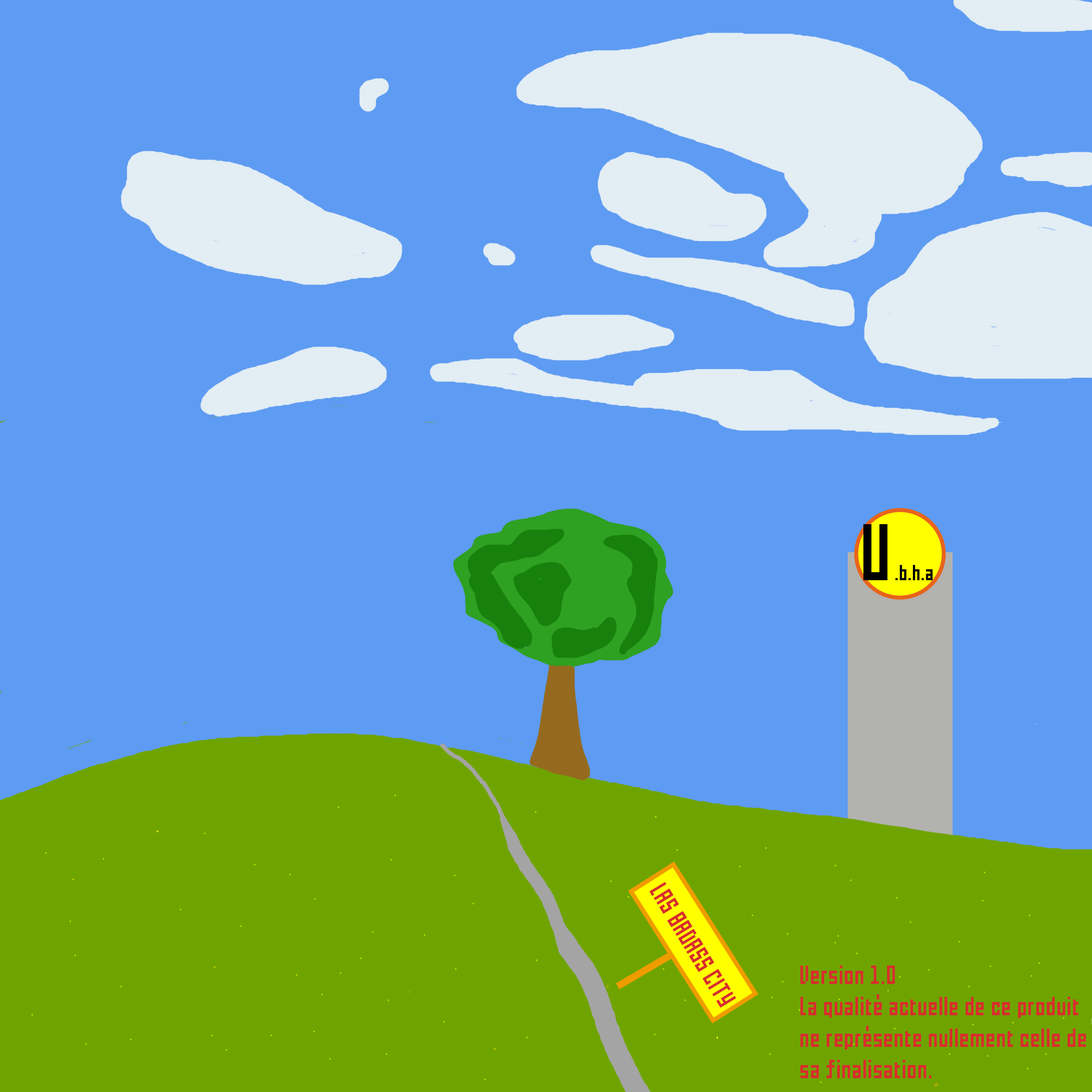
<style>
.page{position:relative;width:1092px;height:1092px;background:#5e9bf2}
.page>*{position:absolute;margin:0}
.t1{font:26.2px "pxl";color:#d82d2d}
</style>
<div class="page">
<p class="t1" style="left:649px;top:882px;width:87px;height:126px;rotate:59deg">LAS BADASS CITY</p>
<p class="t1" style="left:800px;top:965px;width:286px;height:113px">Version 1.0<br>La qualité actuelle de ce produit <br>ne représente nullement celle de<br>sa finalisation.</p>
</div>
